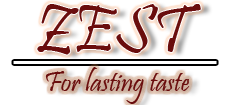
<style>
.page{position:relative;width:230px;height:105px;background:#ffffff}
.page>*{position:absolute;margin:0}
.t1{font:69.4px "Pristina-Regular";color:#6a0d0d}
.t2{font:28.7px "Pristina-Regular";color:#6a0d0d}
</style>
<div class="page">
<p class="t1" style="left:37px;top:4px;width:164px;height:51px">ZEST</p>
<p class="t2" style="left:45px;top:67px;width:145px;height:37px">For lasting taste</p>
</div>
